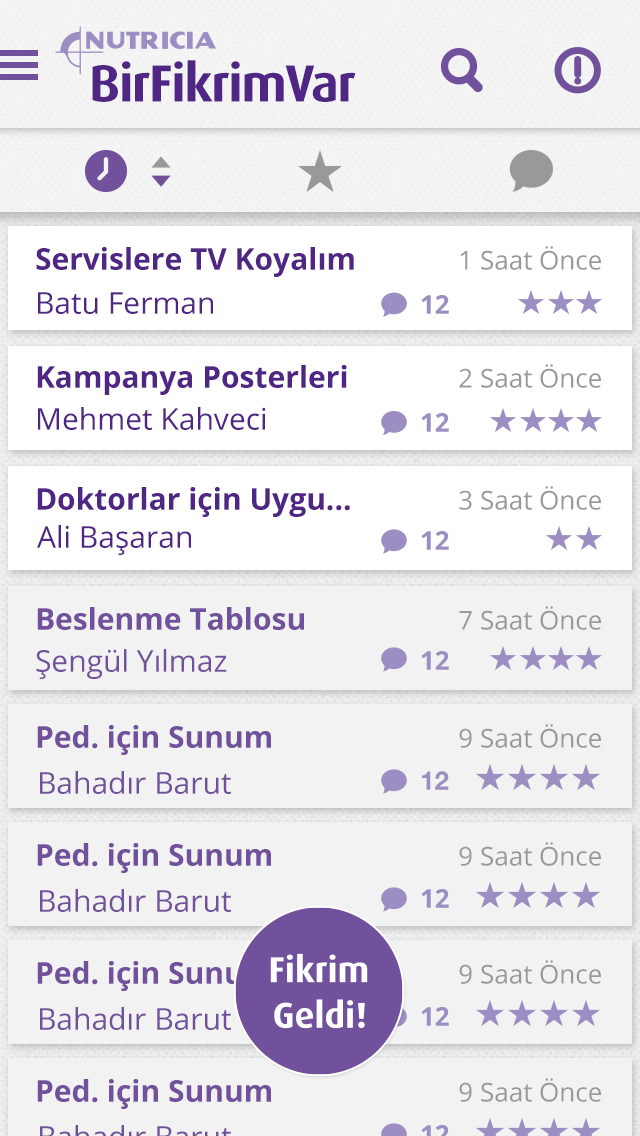
<style>
.page{position:relative;width:640px;height:1136px;background:#f2f2f2}
.page>*{position:absolute;margin:0}
.t1{font:52.5px "DaxPro-Bold";letter-spacing:-0.025em;color:#4f2683}
.t2{font:26px "OpenSans";color:#999999}
.t3{font:30px "OpenSans-Bold";color:#4f2683}
.t4{font:30px "OpenSans";color:#4f2683}
.t5{font:26px "OpenSans-Bold";color:#9c8dc3}
.t6{font:30px "OpenSans-Bold";color:#72519c}
.t7{font:30px "OpenSans";color:#72519c}
.t8{font:26px "HelveticaNeue-Bold";color:#9c8dc3}
</style>
<div class="page">
<p class="t1" style="left:92px;top:60px;width:264px;height:42px">BirFikrimVar</p>
<p class="t2" style="left:460px;top:246px;width:141px;height:24px">1 Saat Önce</p>
<p class="t3" style="left:36px;top:247px;width:318px;height:30px">Servislere TV Koyalım</p>
<p class="t4" style="left:38px;top:292px;width:175px;height:22px">Batu Ferman</p>
<p class="t5" style="left:421px;top:295px;width:28px;height:19px">12</p>
<p class="t3" style="left:37px;top:365px;width:310px;height:30px">Kampanya Posterleri</p>
<p class="t2" style="left:459px;top:364px;width:142px;height:24px">2 Saat Önce</p>
<p class="t4" style="left:38px;top:407px;width:228px;height:23px">Mehmet Kahveci</p>
<p class="t5" style="left:421px;top:413px;width:28px;height:19px">12</p>
<p class="t2" style="left:459px;top:486px;width:142px;height:24px">3 Saat Önce</p>
<p class="t3" style="left:37px;top:487px;width:313px;height:30px">Doktorlar için Uygu...</p>
<p class="t4" style="left:37px;top:525px;width:154px;height:30px">Ali Başaran</p>
<p class="t5" style="left:421px;top:531px;width:28px;height:19px">12</p>
<p class="t2" style="left:459px;top:606px;width:142px;height:24px">7 Saat Önce</p>
<p class="t6" style="left:37px;top:607px;width:267px;height:23px">Beslenme Tablosu</p>
<p class="t7" style="left:36px;top:649px;width:191px;height:30px">Şengül Yılmaz</p>
<p class="t5" style="left:421px;top:651px;width:28px;height:19px">12</p>
<p class="t6" style="left:37px;top:725px;width:234px;height:30px">Ped. için Sunum</p>
<p class="t2" style="left:459px;top:724px;width:142px;height:24px">9 Saat Önce</p>
<p class="t7" style="left:40px;top:771px;width:191px;height:23px">Bahadır Barut</p>
<p class="t8" style="left:422px;top:771px;width:27px;height:19px">12</p>
<p class="t6" style="left:37px;top:843px;width:234px;height:30px">Ped. için Sunum</p>
<p class="t2" style="left:459px;top:842px;width:142px;height:24px">9 Saat Önce</p>
<p class="t7" style="left:40px;top:889px;width:191px;height:23px">Bahadır Barut</p>
<p class="t5" style="left:421px;top:889px;width:28px;height:19px">12</p>
<p class="t6" style="left:37px;top:961px;width:234px;height:30px">Ped. için Sunum</p>
<p class="t2" style="left:459px;top:960px;width:142px;height:24px">9 Saat Önce</p>
<p class="t7" style="left:40px;top:1007px;width:191px;height:23px">Bahadır Barut</p>
<p class="t5" style="left:421px;top:1007px;width:28px;height:19px">12</p>
<p class="t6" style="left:37px;top:1079px;width:234px;height:30px">Ped. için Sunum</p>
<p class="t2" style="left:459px;top:1078px;width:142px;height:24px">9 Saat Önce</p>
</div>
